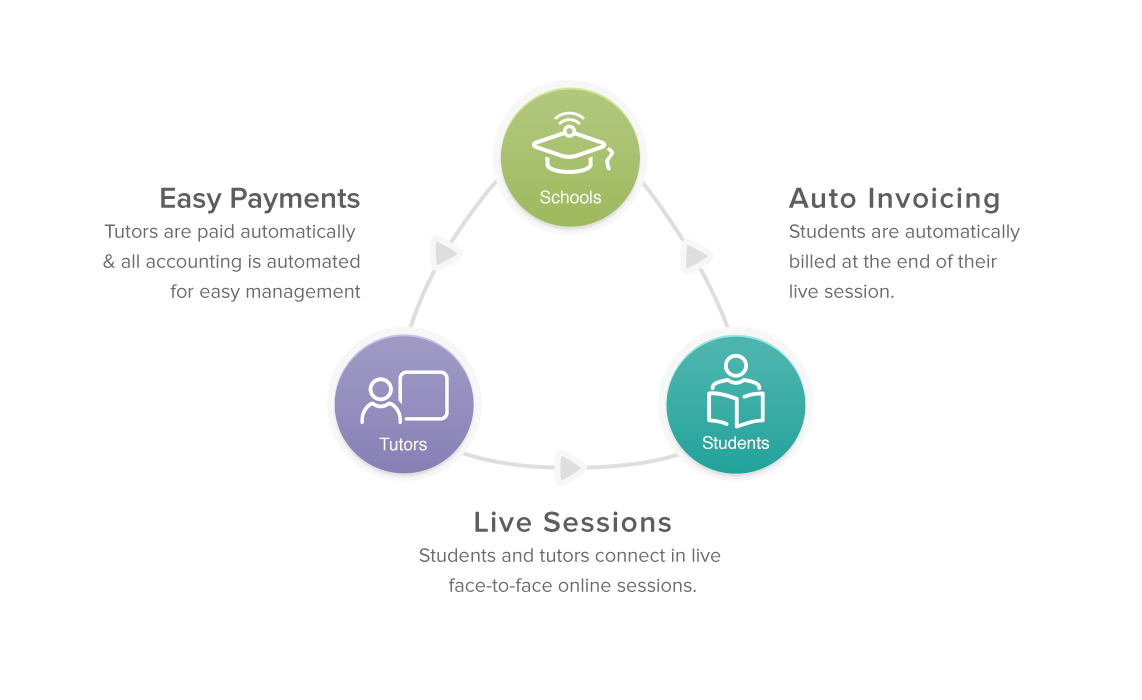
<style>
.page{position:relative;width:1142px;height:700px;background:#ffffff}
.page>*{position:absolute;margin:0}
.t1{font:20px/30px "ProximaNova-Regular";color:#6b6b6b}
.t2{font:30px/30px "ProximaNova-Semibold";color:#5e5e5e}
.t3{font:17.4px "Helvetica";color:#ffffff}
.t4{font:30px/30px "ProximaNova-Semibold";letter-spacing:0.05em;color:#5e5e5e}
.t5{font:17.3px "Helvetica";color:#ffffff}
</style>
<div class="page">
<p class="t1" style="left:103px;top:187px;width:258px;height:115px;text-align:right"><span class="t2">Easy Payments<br></span>Tutors are paid automatically <br>&amp; all accounting is automated<br>for easy management</p>
<p class="t3" style="left:540px;top:190px;width:61px;height:14px">Schools</p>
<p class="t1" style="left:788px;top:187px;width:232px;height:111px"><span class="t4">Auto Invoicing<br></span>Students are automatically <br>billed at the end of their<br>live session.</p>
<p class="t3" style="left:379px;top:437px;width:48px;height:14px">Tutors</p>
<p class="t5" style="left:703px;top:436px;width:66px;height:13px">Students</p>
<p class="t1" style="left:419px;top:511px;width:302px;height:81px;text-align:center"><span class="t4">Live Sessions<br></span>Students and tutors connect in live <br>face-to-face online sessions.</p>
</div>
